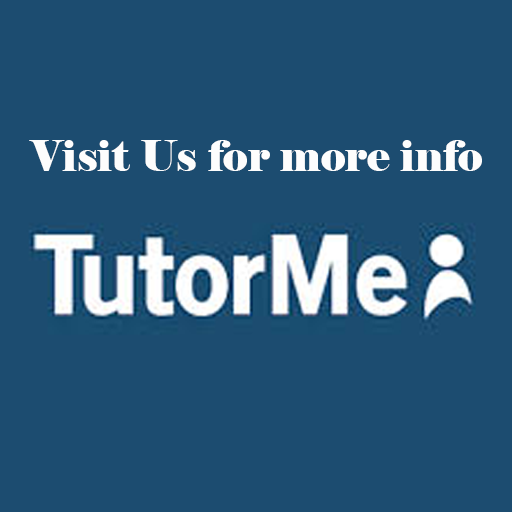
<style>
.page{position:relative;width:512px;height:512px;background:#1c4c70}
.page>*{position:absolute;margin:0}
.t1{font:42.8px "Elephant-Regular";color:#fdfdfd}
</style>
<div class="page">
<p class="t1" style="left:29px;top:140px;width:453px;height:31px">Visit Us for more info</p>
</div>
